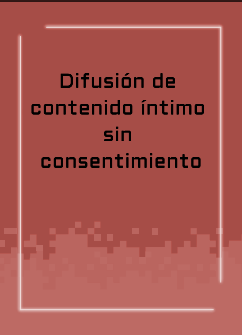
<style>
.page{position:relative;width:242px;height:335px;background:#a64d47}
.page>*{position:absolute;margin:0}
.t1{font:20px/26.7px "Aldrich-Regular";letter-spacing:0.015em;color:#000000}
</style>
<div class="page">
<p class="t1" style="left:31px;top:73px;width:173px;height:95px;text-align:center">Difusión de <br>contenido íntimo <br>sin <br>consentimiento</p>
</div>
